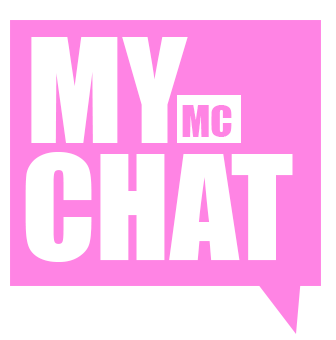
<style>
.page{position:relative;width:336px;height:340px;background:#ffffff}
.page>*{position:absolute;margin:0}
.t1{font:133.8px "Impact";color:#ffffff}
.t2{font:40.8px "Impact";color:#ff84e4}
</style>
<div class="page">
<p class="t1" style="left:31px;top:37px;width:157px;height:106px">MY</p>
<p class="t2" style="left:182px;top:105px;width:50px;height:32px">MC</p>
<p class="t1" style="left:25px;top:152px;width:268px;height:110px">CHAT</p>
</div>
